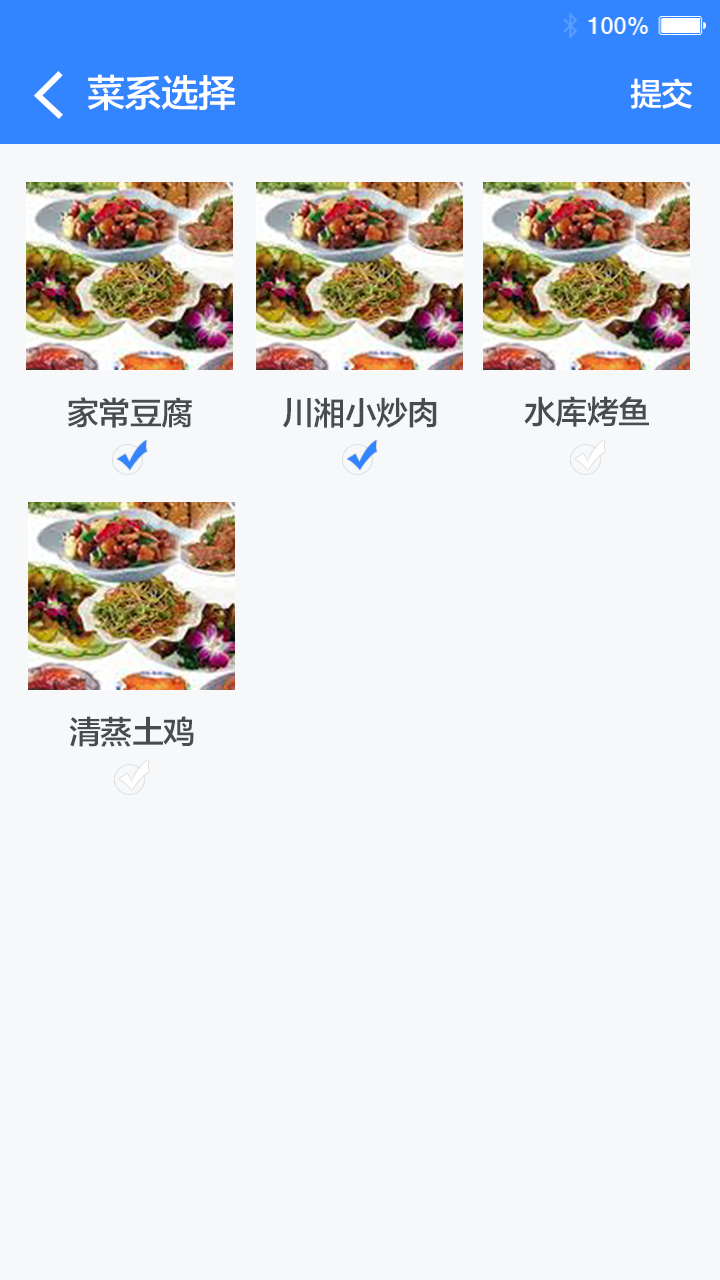
<style>
.page{position:relative;width:720px;height:1280px;background:#f7f8fa}
.page>*{position:absolute;margin:0}
.t1{font:38px "FZLTZHK--GBK1-0";letter-spacing:-0.025em;color:#ffffff}
.t2{font:32px "FZLTZHK--GBK1-0";letter-spacing:-0.025em;color:#ffffff}
.t3{font:32px "FZLTZHK--GBK1-0";letter-spacing:-0.025em;color:#494b4d}
</style>
<div class="page">
<p class="t1" style="left:88px;top:74px;width:147px;height:37px">菜系选择</p>
<p class="t2" style="left:630px;top:78px;width:62px;height:31px">提交</p>
<p class="t3" style="left:67px;top:397px;width:125px;height:31px">家常豆腐</p>
<p class="t3" style="left:283px;top:397px;width:154px;height:31px">川湘小炒肉</p>
<p class="t3" style="left:524px;top:396px;width:125px;height:31px">水库烤鱼</p>
<p class="t3" style="left:69px;top:716px;width:125px;height:31px">清蒸土鸡</p>
</div>
